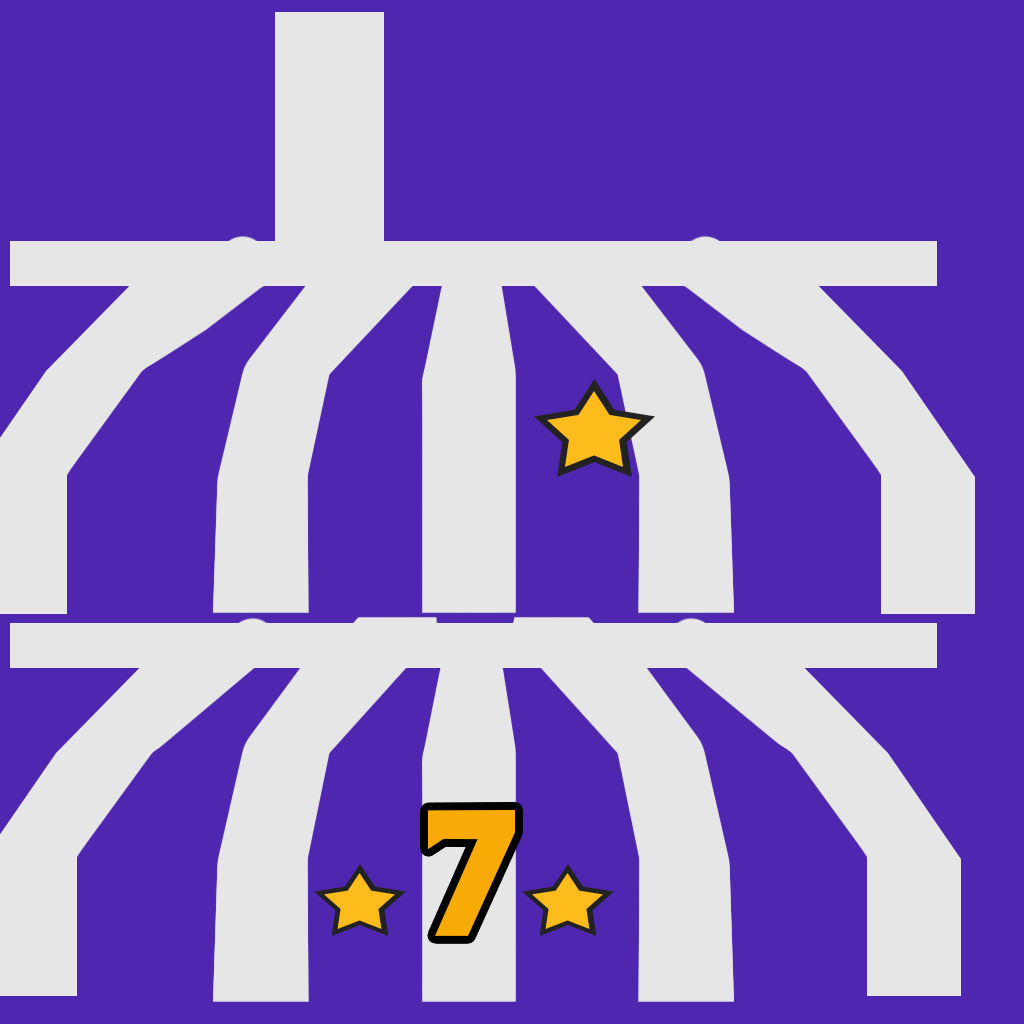
<style>
.page{position:relative;width:1024px;height:1024px;background:#4f26af}
.page>*{position:absolute;margin:0}
.t1{font:179.4px "Luchador-Regular";letter-spacing:0.05em;color:#f8ab06}
</style>
<div class="page">
<p class="t1" style="left:428px;top:809px;width:87px;height:127px">7</p>
</div>
